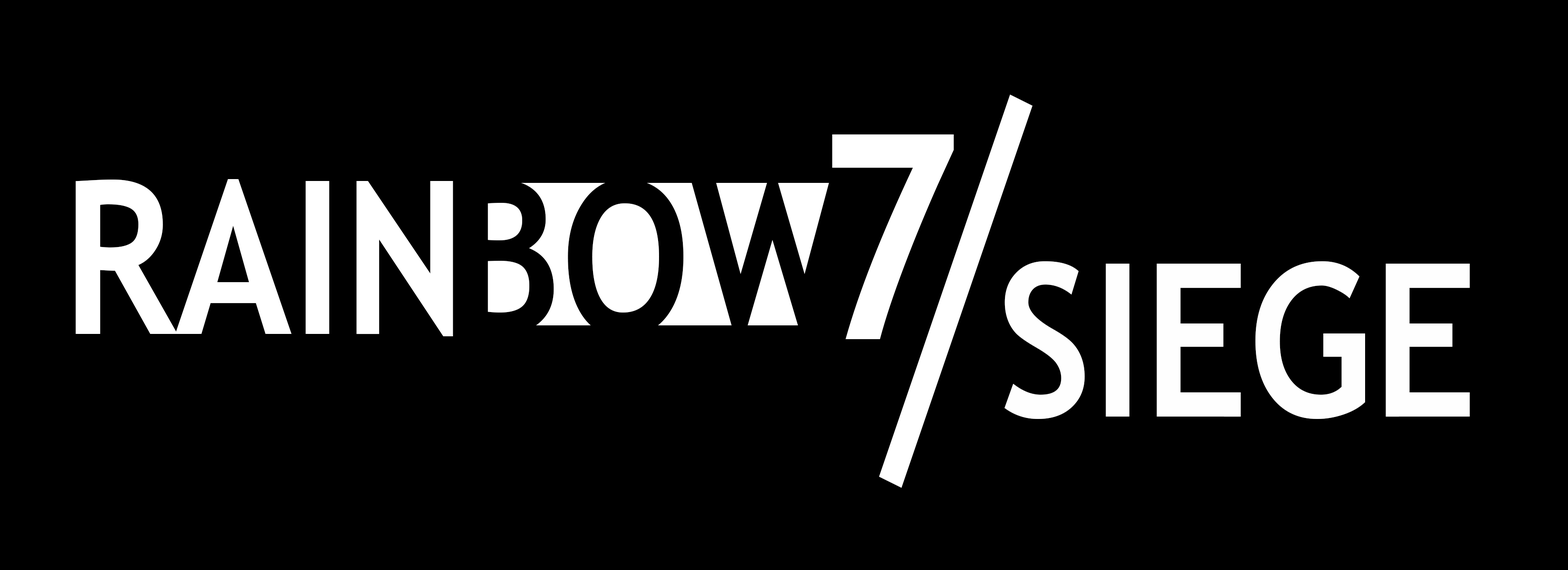
<style>
.page{position:relative;width:1568px;height:570px;background:#000000}
.page>*{position:absolute;margin:0}
.t1{font:285.1px "TrebuchetMS-Bold";color:#ffffff;scale:0.86 1}
.t2{font:213.8px "TrebuchetMS-Bold";color:#ffffff;scale:0.86 1}
.t3{font:213.8px "TrebuchetMS-Bold";color:#000000;scale:0.86 1}
.t4{font:213.8px "TrebuchetMS-Bold";color:#fefefe;scale:0.86 1}
</style>
<div class="page">
<p class="t1" style="left:832px;top:134px;width:122px;height:205px">7</p>
<p class="t2" style="left:76px;top:179px;width:377px;height:157px">RAIN</p>
<p class="t3" style="left:464px;top:179px;width:390px;height:158px">BOW</p>
<p class="t4" style="left:1004px;top:261px;width:466px;height:158px">SIEGE</p>
</div>
